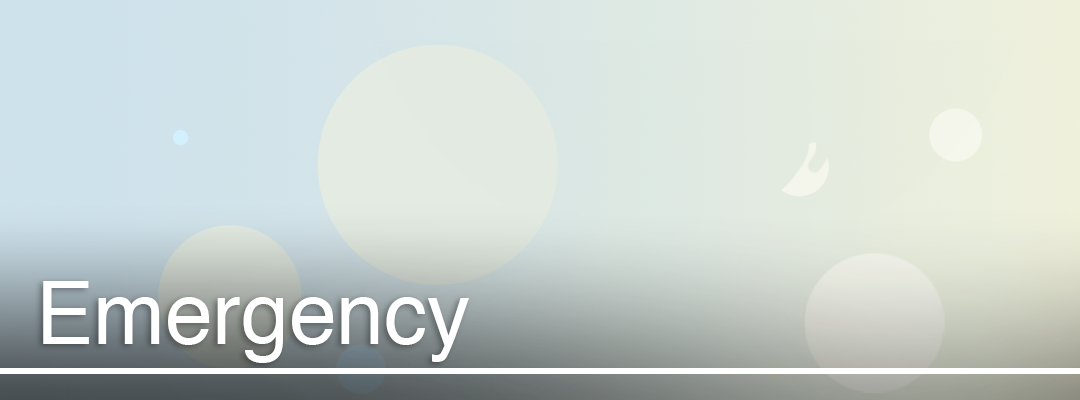
<style>
.page{position:relative;width:1080px;height:400px}
.page>*{position:absolute;margin:0}
.t1{font:87.4px "Helvetica";color:#ffffff}
</style>
<div class="page">
<p class="t1" style="left:43px;top:281px;width:426px;height:82px">Emergency</p>
</div>
